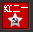
<style>
.page{position:relative;width:33px;height:32px;background:#c50000}
.page>*{position:absolute;margin:0}
.t1{font:10.4px "SimSun";letter-spacing:-0.25em;color:#ffffff}
</style>
<div class="page">
<p class="t1" style="left:4px;top:5px;width:24px;height:7px">红二一</p>
</div>
